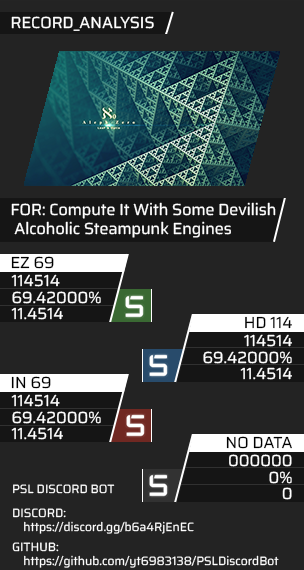
<style>
.page{position:relative;width:304px;height:570px;background:#232323}
.page>*{position:absolute;margin:0}
.t1{font:16px "Saira-Regular";color:#ffffff}
.t2{font:16px "Saira-Regular";color:#000000}
.t3{font:12px "Saira-Regular";color:#ffffff}
</style>
<div class="page">
<p class="t1" style="left:11px;top:16px;width:143px;height:15px">RECORD_ANALYSIS</p>
<p class="t1" style="left:11px;top:202px;width:265px;height:36px">FOR: Compute It With Some Devilish<br> Alcoholic Steampunk Engines</p>
<p class="t2" style="left:11px;top:256px;width:43px;height:13px">EZ 69</p>
<p class="t1" style="left:11px;top:274px;width:49px;height:13px">114514</p>
<p class="t1" style="left:12px;top:291px;width:89px;height:13px">69.42000%</p>
<p class="t1" style="left:11px;top:307px;width:52px;height:13px">11.4514</p>
<p class="t2" style="left:245px;top:316px;width:47px;height:13px">HD 114</p>
<p class="t1" style="left:244px;top:334px;width:48px;height:13px">114514</p>
<p class="t1" style="left:203px;top:351px;width:89px;height:13px">69.42000%</p>
<p class="t2" style="left:11px;top:376px;width:40px;height:13px">IN 69</p>
<p class="t1" style="left:240px;top:367px;width:52px;height:13px">11.4514</p>
<p class="t1" style="left:11px;top:394px;width:49px;height:13px">114514</p>
<p class="t1" style="left:12px;top:411px;width:89px;height:13px">69.42000%</p>
<p class="t1" style="left:11px;top:427px;width:52px;height:13px">11.4514</p>
<p class="t2" style="left:226px;top:436px;width:66px;height:13px">NO DATA</p>
<p class="t1" style="left:229px;top:454px;width:63px;height:13px">000000</p>
<p class="t1" style="left:269px;top:471px;width:23px;height:13px">0%</p>
<p class="t3" style="left:13px;top:484px;width:102px;height:10px">PSL DISCORD BOT</p>
<p class="t1" style="left:282px;top:487px;width:10px;height:13px">0</p>
<p class="t3" style="left:13px;top:508px;width:181px;height:26px">DISCORD: <br>    https://discord.gg/b6a4RjEnEC</p>
<p class="t3" style="left:12px;top:542px;width:267px;height:26px">GITHUB: <br>    https://github.com/yt6983138/PSLDiscordBot</p>
</div>
